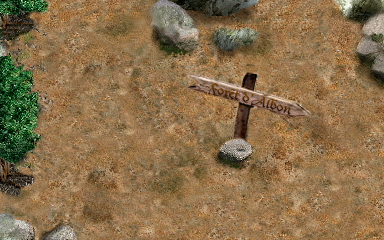
<style>
.page{position:relative;width:384px;height:240px}
.page>*{position:absolute;margin:0}
.t1{font:13.5px "DucDeBerry";scale:1.19 1}
</style>
<div class="page">
<p class="t1" style="left:209px;top:83px;width:82px;height:32px;rotate:16deg">Forêt d’Albon</p>
</div>
